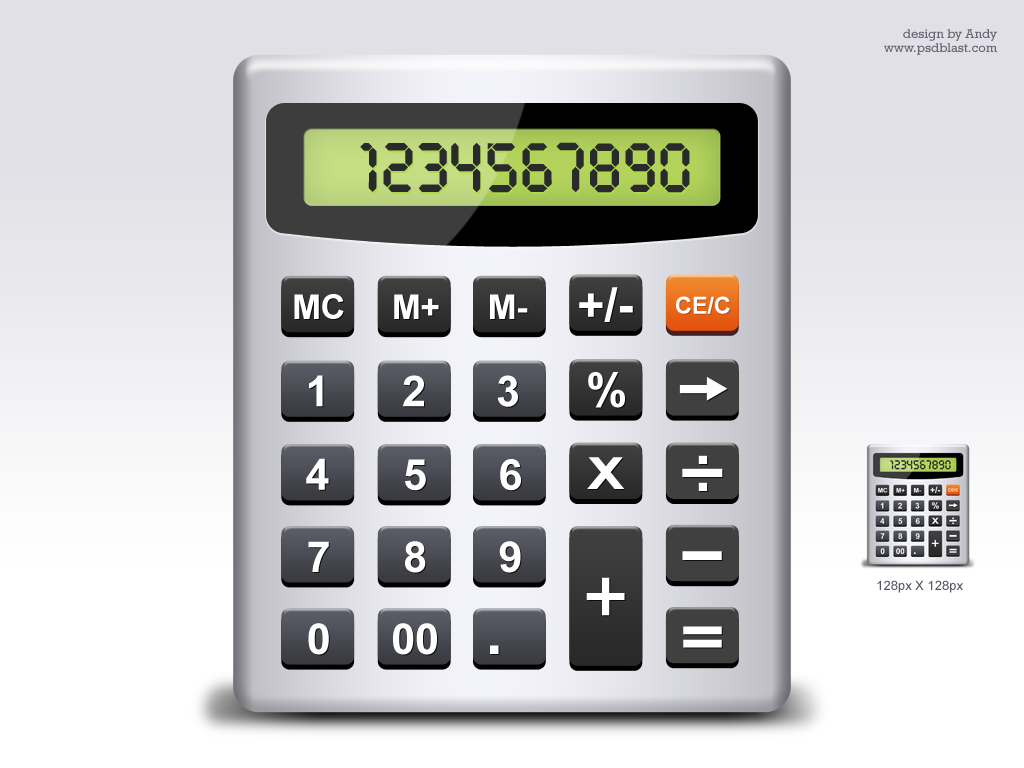
<style>
.page{position:relative;width:1024px;height:768px}
.page>*{position:absolute;margin:0}
.t1{font:78.2px "PocketCalculator";color:#292a2b}
.t2{font:33.9px "Arial-BoldMT";color:#ffffff;text-transform:uppercase}
.t3{font:46.9px "Arial-BoldMT";color:#ffffff;text-transform:uppercase}
.t4{font:23.5px "Arial-BoldMT";color:#ffffff;text-transform:uppercase}
.t5{font:43px "Arial-BoldMT";color:#ffffff;text-transform:uppercase}
.t6{font:44.1px "Arial-BoldMT";color:#ffffff;text-transform:uppercase;scale:1.28 1}
.t7{font:61.9px "Arial-BoldMT";color:#ffffff;text-transform:uppercase;scale:2.33 1}
.t8{font:78.2px "ArialMT";color:#ffffff;text-transform:uppercase;font-weight:bold}
.t9{font:13px "ArialMT";color:#585864}
.t10{font:61.9px "Arial-BoldMT";color:#ffffff;text-transform:uppercase;scale:1.25 1}
.t11{font:62.6px "Arial-BoldMT";color:#ffffff;text-transform:uppercase}
</style>
<div class="page">
<p class="t1" style="left:360px;top:142px;width:330px;height:51px">1234567890</p>
<p class="t2" style="left:294px;top:294px;width:50px;height:25px">MC</p>
<p class="t2" style="left:394px;top:294px;width:45px;height:25px">M+</p>
<p class="t2" style="left:490px;top:294px;width:38px;height:25px">M-</p>
<p class="t3" style="left:579px;top:287px;width:54px;height:35px">+/-</p>
<p class="t4" style="left:676px;top:296px;width:54px;height:18px">CE/C</p>
<p class="t5" style="left:309px;top:375px;width:14px;height:32px">1</p>
<p class="t5" style="left:403px;top:375px;width:21px;height:32px">2</p>
<p class="t5" style="left:497px;top:375px;width:21px;height:32px">3</p>
<p class="t3" style="left:588px;top:372px;width:37px;height:36px">%</p>
<p class="t5" style="left:306px;top:458px;width:23px;height:32px">4</p>
<p class="t5" style="left:405px;top:459px;width:21px;height:32px">5</p>
<p class="t5" style="left:500px;top:459px;width:21px;height:32px">6</p>
<p class="t6" style="left:587px;top:457px;width:38px;height:32px">X</p>
<p class="t5" style="left:308px;top:541px;width:21px;height:31px">7</p>
<p class="t5" style="left:405px;top:541px;width:21px;height:32px">8</p>
<p class="t5" style="left:499px;top:541px;width:22px;height:32px">9</p>
<p class="t7" style="left:682px;top:551px;width:40px;height:9px">-</p>
<p class="t8" style="left:586px;top:577px;width:39px;height:39px">+</p>
<p class="t9" style="left:877px;top:580px;width:86px;height:13px">128px X 128px</p>
<p class="t5" style="left:308px;top:623px;width:21px;height:32px">0</p>
<p class="t5" style="left:393px;top:623px;width:44px;height:32px">00</p>
<p class="t10" style="left:683px;top:626px;width:39px;height:22px">=</p>
<p class="t11" style="left:490px;top:645px;width:9px;height:9px">.</p>
</div>
